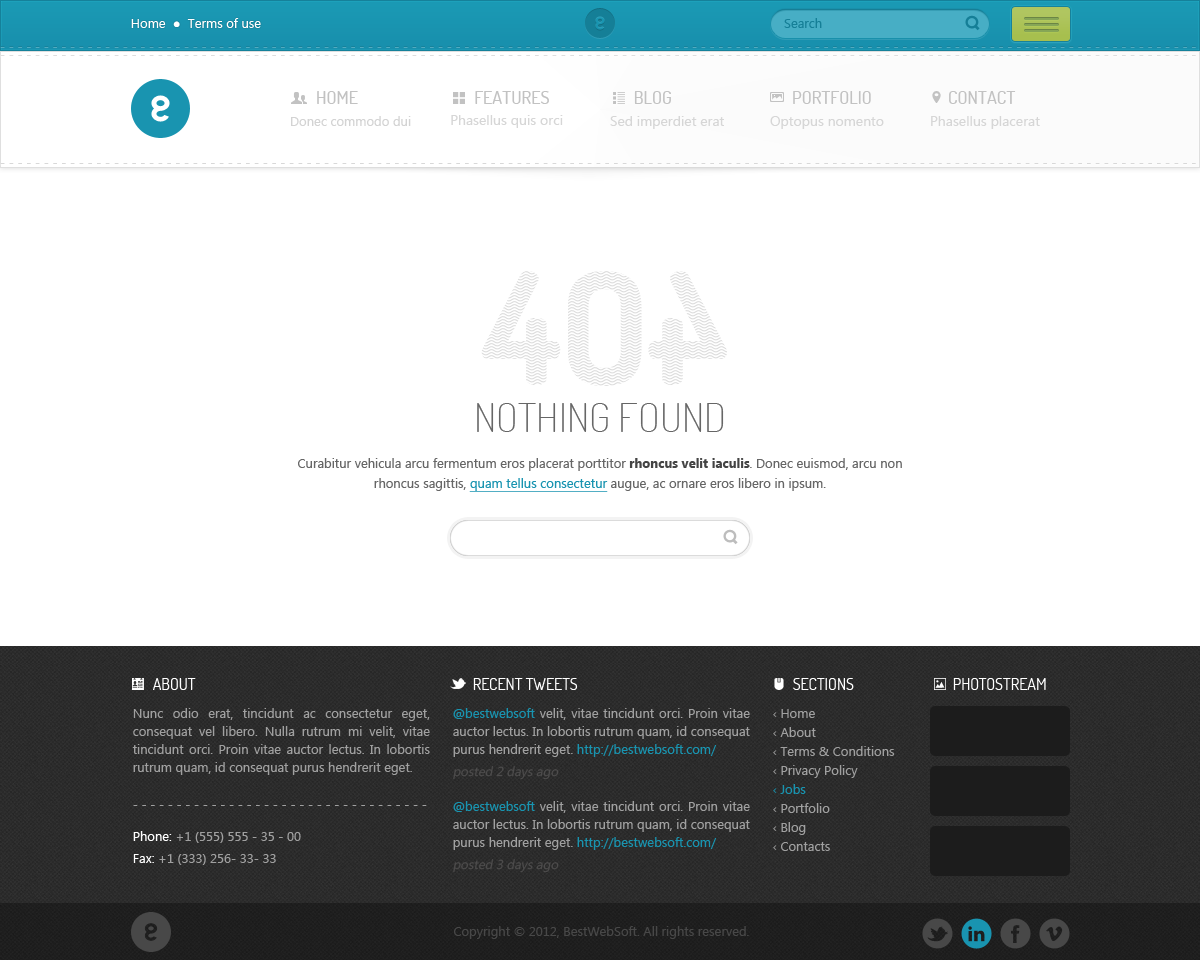
<style>
.page{position:relative;width:1200px;height:960px;background:#ffffff}
.page>*{position:absolute;margin:0}
.t1{font:13px "Ebrima";color:#ffffff}
.t2{font:13px "ArialMT";color:#ffffff}
.t3{font:13px "Ebrima";color:#157f97}
.t4{font:18px "Dosis-Medium";color:#c2c2c2;text-transform:uppercase}
.t5{font:13px "Ebrima";color:#d3d3d3}
.t6{font:14px "Ebrima";color:#d6d6d6}
.t7{font:40px "Dosis-ExtraLight";color:#666666;text-transform:uppercase}
.t8{font:13px/20px "Ebrima";color:#666666}
.t9{font:13px/20px "Ebrima-Bold";color:#444444}
.t10{font:13px/20px "Ebrima";color:#1994b0;text-decoration:underline}
.t11{font:16px "Dosis-Regular";color:#ffffff;text-transform:uppercase}
.t12{font:13px/18px "Ebrima";color:#a0a0a0}
.t13{font:13px/18px "Ebrima";color:#1994b0}
.t14{font:13px/19px "Ebrima";color:#a0a0a0}
.t15{font:13px/19px "Ebrima";color:#1994b0}
.t16{font:13px "Ebrima";color:#4d4c4c;font-style:italic}
.t17{font:13px "Ebrima";color:#a0a0a0}
.t18{font:13px "Ebrima";color:#484848}
</style>
<div class="page">
<p class="t1" style="left:131px;top:18px;width:130px;height:10px">Home  <span class="t2">●  </span>Terms of use</p>
<p class="t3" style="left:784px;top:18px;width:38px;height:10px">Search</p>
<p class="t4" style="left:317px;top:91px;width:41px;height:13px">Home</p>
<p class="t4" style="left:475px;top:91px;width:74px;height:13px">Features</p>
<p class="t4" style="left:634px;top:91px;width:37px;height:13px">Blog</p>
<p class="t4" style="left:793px;top:91px;width:78px;height:13px">Portfolio</p>
<p class="t4" style="left:949px;top:91px;width:67px;height:13px">Contact</p>
<p class="t5" style="left:291px;top:116px;width:120px;height:10px">Donec commodo dui</p>
<p class="t6" style="left:451px;top:115px;width:112px;height:13px">Phasellus quis orci</p>
<p class="t6" style="left:610px;top:116px;width:114px;height:13px">Sed imperdiet erat</p>
<p class="t6" style="left:770px;top:116px;width:114px;height:13px">Optopus nomento</p>
<p class="t6" style="left:931px;top:116px;width:109px;height:13px">Phasellus placerat</p>
<p class="t7" style="left:477px;top:403px;width:247px;height:29px">Nothing Found</p>
<p class="t8" style="left:298px;top:458px;width:604px;height:34px;text-align:center">Curabitur vehicula arcu fermentum eros placerat porttitor <span class="t9">rhoncus velit iaculis</span>. Donec euismod, arcu non rhoncus sagittis, <span class="t10">quam tellus consectetur</span> augue, ac ornare eros libero in ipsum.</p>
<p class="t11" style="left:153px;top:678px;width:43px;height:12px">About</p>
<p class="t11" style="left:473px;top:678px;width:105px;height:12px">Recent tweets</p>
<p class="t11" style="left:793px;top:678px;width:61px;height:12px">Sections</p>
<p class="t11" style="left:953px;top:678px;width:93px;height:12px">Photostream</p>
<p class="t12" style="left:132px;top:708px;width:298px;height:67px;text-align:justify">Nunc odio erat, tincidunt ac consectetur eget, consequat vel libero. Nulla rutrum mi velit, vitae tincidunt orci. Proin vitae auctor lectus. In lobortis rutrum quam, id consequat purus hendrerit eget.</p>
<p class="t12" style="left:453px;top:708px;width:297px;height:49px;text-align:justify"><span class="t13">@bestwebsoft </span>velit, vitae tincidunt orci. Proin vitae auctor lectus. In lobortis rutrum quam, id consequat purus hendrerit eget. <span class="t13">http://bestwebsoft.com/</span></p>
<p class="t14" style="left:773px;top:709px;width:122px;height:142px;text-align:justify">‹ Home<br>‹ About<br>‹ Terms &amp; Conditions<br>‹ Privacy Policy<br><span class="t15">‹ Jobs<br></span>‹ Portfolio<br>‹ Blog<br>‹ Contacts</p>
<p class="t16" style="left:453px;top:766px;width:106px;height:14px">posted 2 days ago</p>
<p class="t17" style="left:133px;top:805px;width:294px;height:1px">- - - - - - - - - - - - - - - - - - - - - - - - - - - - - - - - - -</p>
<p class="t12" style="left:453px;top:801px;width:297px;height:49px;text-align:justify"><span class="t13">@bestwebsoft </span>velit, vitae tincidunt orci. Proin vitae auctor lectus. In lobortis rutrum quam, id consequat purus hendrerit eget. <span class="t13">http://bestwebsoft.com/</span></p>
<p class="t17" style="left:133px;top:831px;width:168px;height:12px"><span class="t1">Phone:</span> +1 (555) 555 - 35 - 00</p>
<p class="t17" style="left:133px;top:854px;width:143px;height:11px"><span class="t1">Fax:</span> +1 (333) 256- 33- 33</p>
<p class="t16" style="left:453px;top:859px;width:106px;height:14px">posted 3 days ago</p>
<p class="t18" style="left:454px;top:926px;width:295px;height:13px">Copyright © 2012, BestWebSoft. All rights reserved.</p>
</div>
